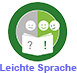
<style>
.page{position:relative;width:77px;height:73px;background:#ffffff}
.page>*{position:absolute;margin:0}
.t1{font:10px "Arial-BoldMT";color:#6464fa}
</style>
<div class="page">
<p class="t1" style="left:0px;top:64px;width:77px;height:9px">Leichte Sprache</p>
</div>
